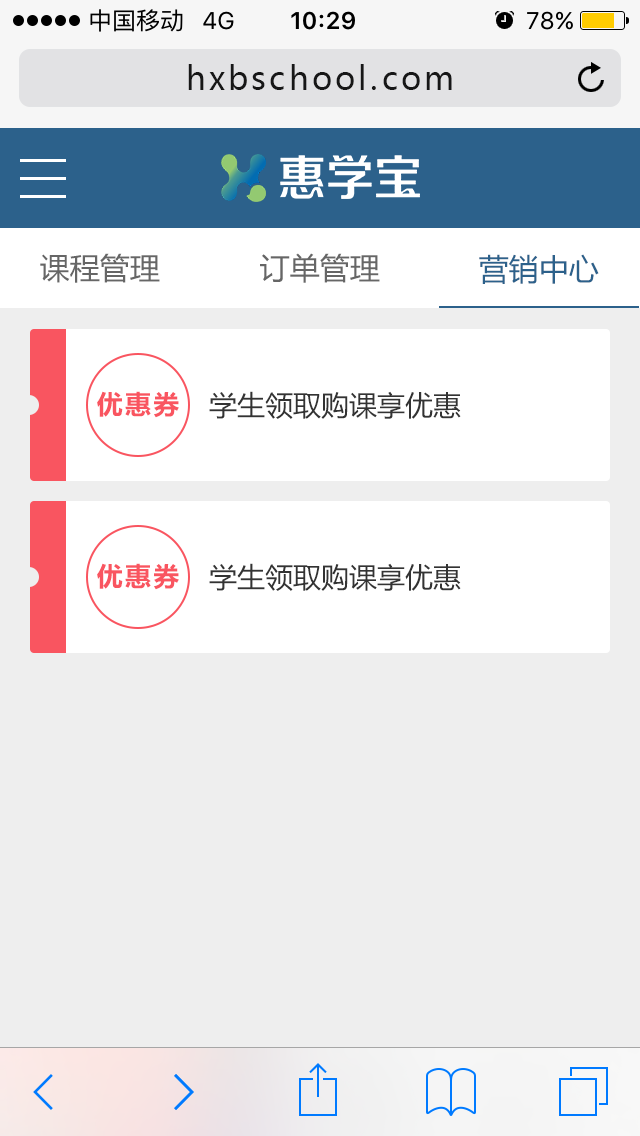
<style>
.page{position:relative;width:640px;height:1136px;background:#eeeeee}
.page>*{position:absolute;margin:0}
.t1{font:32px "MicrosoftYaHei";letter-spacing:0.1em;color:#171717}
.t2{font:30px "MicrosoftYaHei";color:#666666}
.t3{font:30px "MicrosoftYaHei";color:#2c618b}
.t4{font:26px "MicrosoftYaHei-Bold";letter-spacing:0.085em;color:#f95560}
.t5{font:28px "MicrosoftYaHei";color:#333333}
</style>
<div class="page">
<p class="t1" style="left:188px;top:64px;width:264px;height:26px">hxbschool.com</p>
<p class="t2" style="left:40px;top:253px;width:120px;height:30px">课程管理</p>
<p class="t2" style="left:260px;top:253px;width:120px;height:30px">订单管理</p>
<p class="t3" style="left:479px;top:254px;width:120px;height:30px">营销中心</p>
<p class="t4" style="left:97px;top:391px;width:82px;height:27px">优惠券</p>
<p class="t5" style="left:209px;top:391px;width:252px;height:28px">学生领取购课享优惠</p>
<p class="t4" style="left:97px;top:563px;width:82px;height:27px">优惠券</p>
<p class="t5" style="left:209px;top:563px;width:252px;height:28px">学生领取购课享优惠</p>
</div>
